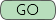
<style>
.page{position:relative;width:56px;height:20px;background:#b8debc}
.page>*{position:absolute;margin:0}
.t1{font:15px "JosefinSansStd-Light";color:#000000}
</style>
<div class="page">
<p class="t1" style="left:16px;top:4px;width:23px;height:11px">GO</p>
</div>
